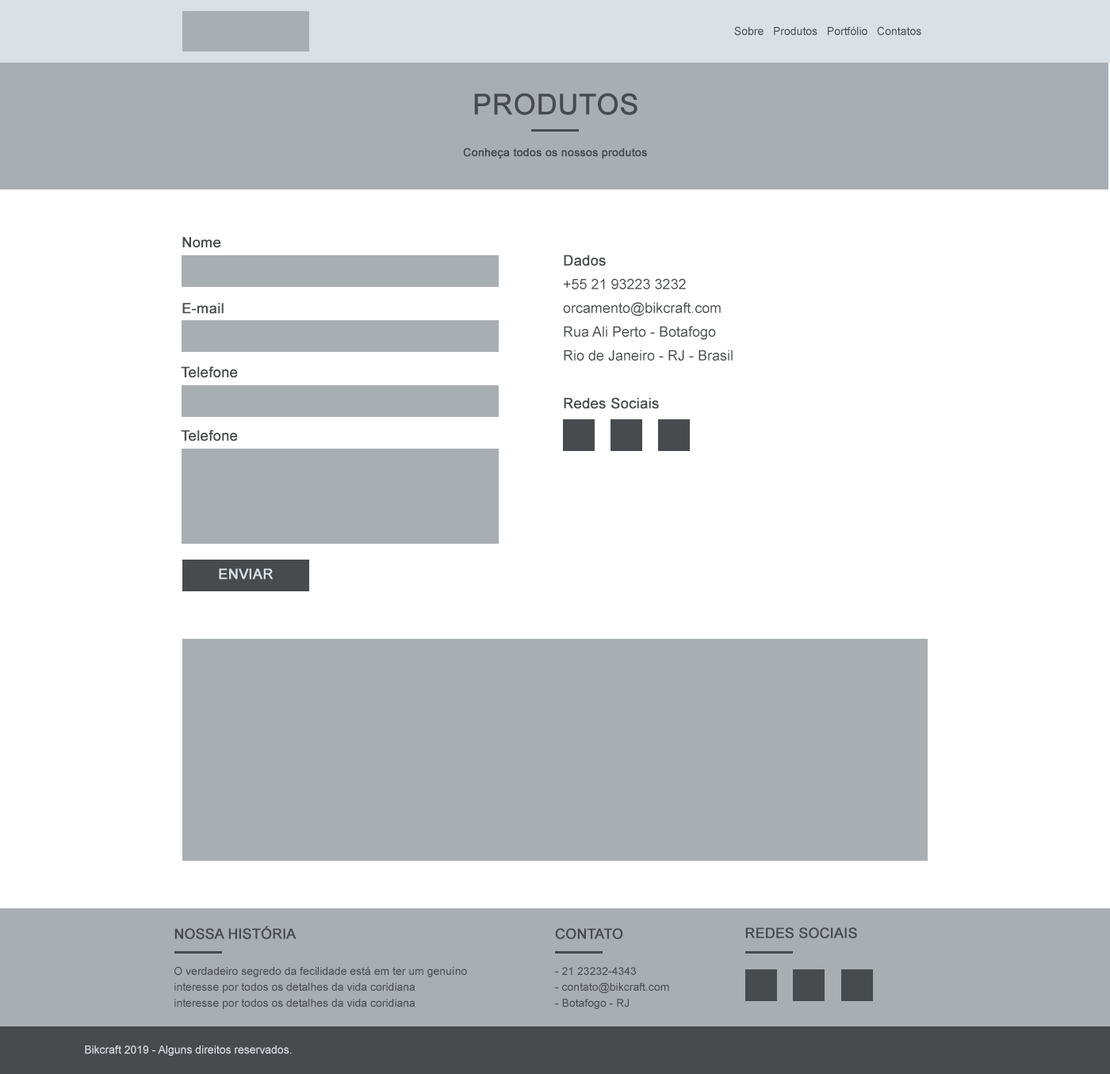
<style>
.page{position:relative;width:1110px;height:1074px;background:#ffffff}
.page>*{position:absolute;margin:0}
.t1{font:11.4px "ArialMT";color:#484b4d}
.t2{font:28.6px "ArialMT";color:#484b4d;text-transform:uppercase;font-weight:bold}
.t3{font:11.1px "ArialMT";color:#484b4d;font-weight:bold}
.t4{font:14.1px "ArialMT";color:#484b4d;font-weight:bold}
.t5{font:14.3px/23.8px "ArialMT";color:#484b4d}
.t6{font:14.3px/23.8px "ArialMT";color:#484b4d;font-weight:bold}
.t7{font:14.2px "ArialMT";color:#484b4d;font-weight:bold}
.t8{font:14.1px "ArialMT";color:#d9e0e6;font-weight:bold}
.t9{font:14.1px "ArialMT";color:#484b4d;text-transform:uppercase;font-weight:bold}
.t10{font:11.1px/15.9px "ArialMT";color:#484b4d}
.t11{font:11.4px "ArialMT";color:#d9e0e6}
</style>
<div class="page">
<p class="t1" style="left:734px;top:26px;width:187px;height:10px">Sobre   Produtos   Portfólio   Contatos</p>
<p class="t2" style="left:474px;top:93px;width:163px;height:22px">produtos</p>
<p class="t3" style="left:463px;top:147px;width:184px;height:12px">Conheça todos os nossos produtos</p>
<p class="t4" style="left:182px;top:237px;width:39px;height:11px">Nome</p>
<p class="t5" style="left:563px;top:255px;width:170px;height:154px"><span class="t6">Dados<br></span>+55 21 93223 3232<br>orcamento@bikcraft.com<br>Rua Ali Perto - Botafogo<br>Rio de Janeiro - RJ - Brasil<br><br><span class="t6">Redes Sociais</span></p>
<p class="t4" style="left:182px;top:303px;width:42px;height:11px">E-mail</p>
<p class="t7" style="left:181px;top:366px;width:57px;height:12px">Telefone</p>
<p class="t7" style="left:181px;top:430px;width:57px;height:12px">Telefone</p>
<p class="t8" style="left:219px;top:568px;width:55px;height:12px">ENVIAR</p>
<p class="t9" style="left:174px;top:926px;width:123px;height:14px">Nossa História</p>
<p class="t9" style="left:555px;top:928px;width:68px;height:12px">contato</p>
<p class="t9" style="left:745px;top:928px;width:112px;height:11px">redes sociais</p>
<p class="t10" style="left:174px;top:966px;width:293px;height:43px">O verdadeiro segredo da fecilidade está em ter um genuíno interesse por todos os detalhes da vida coridiana<br>interesse por todos os detalhes da vida coridiana</p>
<p class="t10" style="left:555px;top:967px;width:114px;height:42px">- 21 23232-4343<br>- contato@bikcraft.com<br>- Botafogo - RJ</p>
<p class="t11" style="left:85px;top:1046px;width:207px;height:10px">Bikcraft 2019 - Alguns direitos reservados.</p>
</div>
